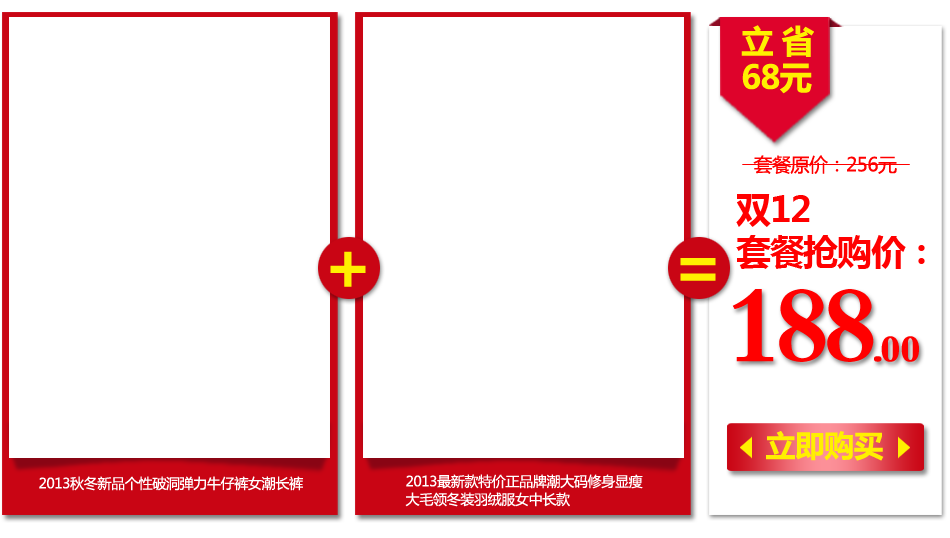
<style>
.page{position:relative;width:950px;height:538px;background:#ffffff}
.page>*{position:absolute;margin:0}
.t1{font:32.4px/36.1px "MicrosoftYaHei-Bold";letter-spacing:-0.05em;color:#fff000;font-weight:bold}
.t2{font:18.9px "MicrosoftYaHei";letter-spacing:-0.05em;color:#ff0000;font-weight:bold}
.t3{font:34.5px "MicrosoftYaHei-Bold";letter-spacing:-0.025em;color:#ff0000}
.t4{font:67.8px "MicrosoftYaHei-Bold";letter-spacing:-0.05em;color:#fff000;font-weight:bold}
.t5{font:113.4px "FZDBSK--GBK1-0";letter-spacing:-0.1em;color:#ff0000;font-weight:bold}
.t6{font:39.1px "FZDBSK--GBK1-0";letter-spacing:-0.1em;color:#ff0000;font-weight:bold}
.t7{font:39.1px "FZDBSK--GBK1-0";letter-spacing:-0.025em;color:#ff0000;font-weight:bold}
.t8{font:30px "MicrosoftYaHei-Bold";letter-spacing:-0.05em;color:#fff000;font-weight:bold}
.t9{font:14px "MicrosoftYaHei";letter-spacing:-0.05em;color:#ffffff;font-weight:bold}
.t10{font:14px/18px "MicrosoftYaHei";letter-spacing:-0.05em;color:#ffffff;font-weight:bold}
</style>
<div class="page">
<p class="t1" style="left:741px;top:25px;width:73px;height:69px">立 省<br>68元</p>
<p class="t2" style="left:753px;top:155px;width:144px;height:19px">套餐原价：256元</p>
<p class="t3" style="left:736px;top:194px;width:74px;height:33px">双12</p>
<p class="t3" style="left:736px;top:235px;width:189px;height:34px">套餐抢购价：</p>
<p class="t4" style="left:330px;top:251px;width:36px;height:36px">+</p>
<p class="t4" style="left:680px;top:258px;width:36px;height:23px">=</p>
<p class="t5" style="left:732px;top:289px;width:187px;height:73px">188<span class="t6">.</span><span class="t7">00</span></p>
<p class="t8" style="left:766px;top:431px;width:118px;height:30px">立即购买</p>
<p class="t9" style="left:39px;top:476px;width:264px;height:15px">2013秋冬新品个性破洞弹力牛仔裤女潮长裤</p>
<p class="t10" style="left:405px;top:474px;width:238px;height:33px">2013最新款特价正品牌潮大码修身显瘦<br>大毛领冬装羽绒服女中长款</p>
</div>
